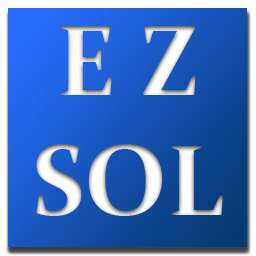
<style>
.page{position:relative;width:256px;height:256px}
.page>*{position:absolute;margin:0}
.t1{font:100px "Constantia-Bold"}
</style>
<div class="page">
<p class="t1" style="left:36px;top:26px;width:187px;height:190px;text-align:center">E Z<br>SOL</p>
</div>
